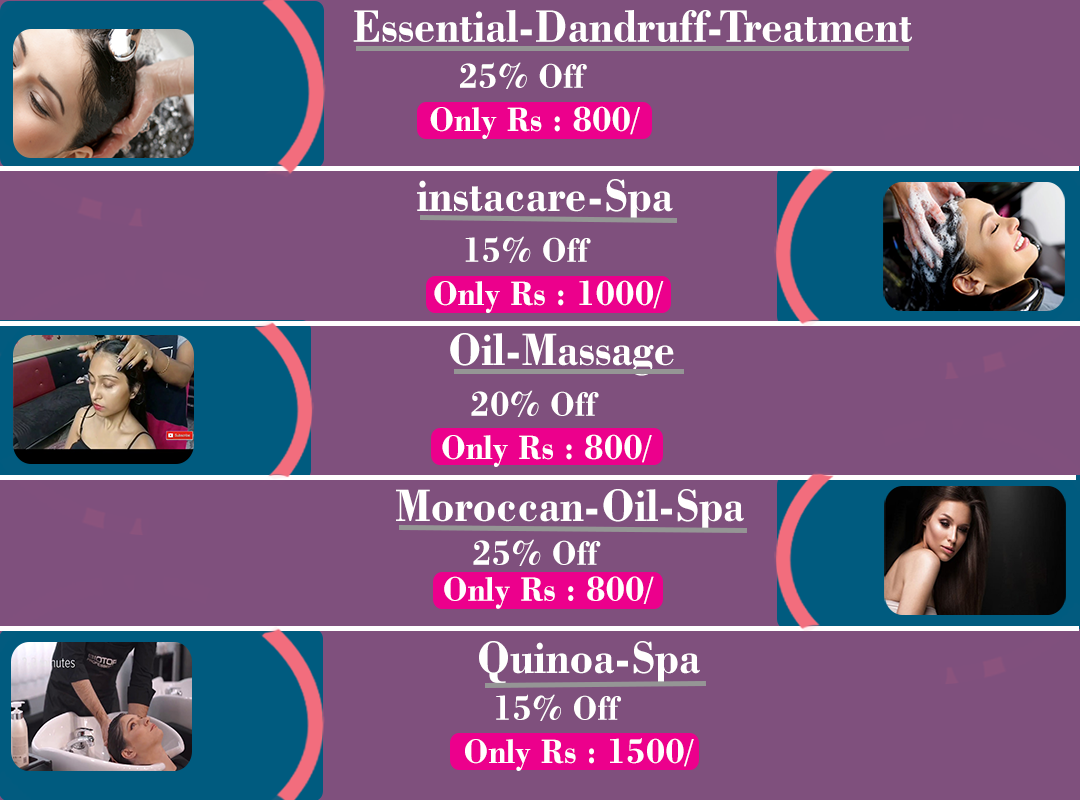
<style>
.page{position:relative;width:1080px;height:800px;background:#7f507d}
.page>*{position:absolute;margin:0}
.t1{font:48px "BodoniBT-Bold";color:#fffffe;scale:0.9 1}
.t2{font:36px "BodoniBT-Bold";color:#fffffe;scale:0.9 1}
.t3{font:36px/36px "BodoniBT-Bold";color:#fffffe;scale:0.9 1}
</style>
<div class="page">
<p class="t1" style="left:353px;top:10px;width:559px;height:32px">Essential-Dandruff-Treatment</p>
<p class="t2" style="left:430px;top:62px;width:210px;height:77px">25% Off<br>Only Rs : 800/</p>
<p class="t1" style="left:417px;top:179px;width:256px;height:43px">instacare-Spa</p>
<p class="t2" style="left:434px;top:236px;width:230px;height:77px">15% Off<br>Only Rs : 1000/</p>
<p class="t1" style="left:450px;top:333px;width:224px;height:43px">Oil-Massage</p>
<p class="t2" style="left:442px;top:390px;width:210px;height:77px">20% Off<br>Only Rs : 800/</p>
<p class="t1" style="left:396px;top:489px;width:348px;height:43px">Moroccan-Oil-Spa</p>
<p class="t3" style="left:444px;top:539px;width:210px;height:70px">25% Off<br>Only Rs : 800/</p>
<p class="t1" style="left:479px;top:641px;width:221px;height:43px">Quinoa-Spa</p>
<p class="t2" style="left:465px;top:694px;width:229px;height:77px">15% Off<br>Only Rs : 1500/</p>
</div>
